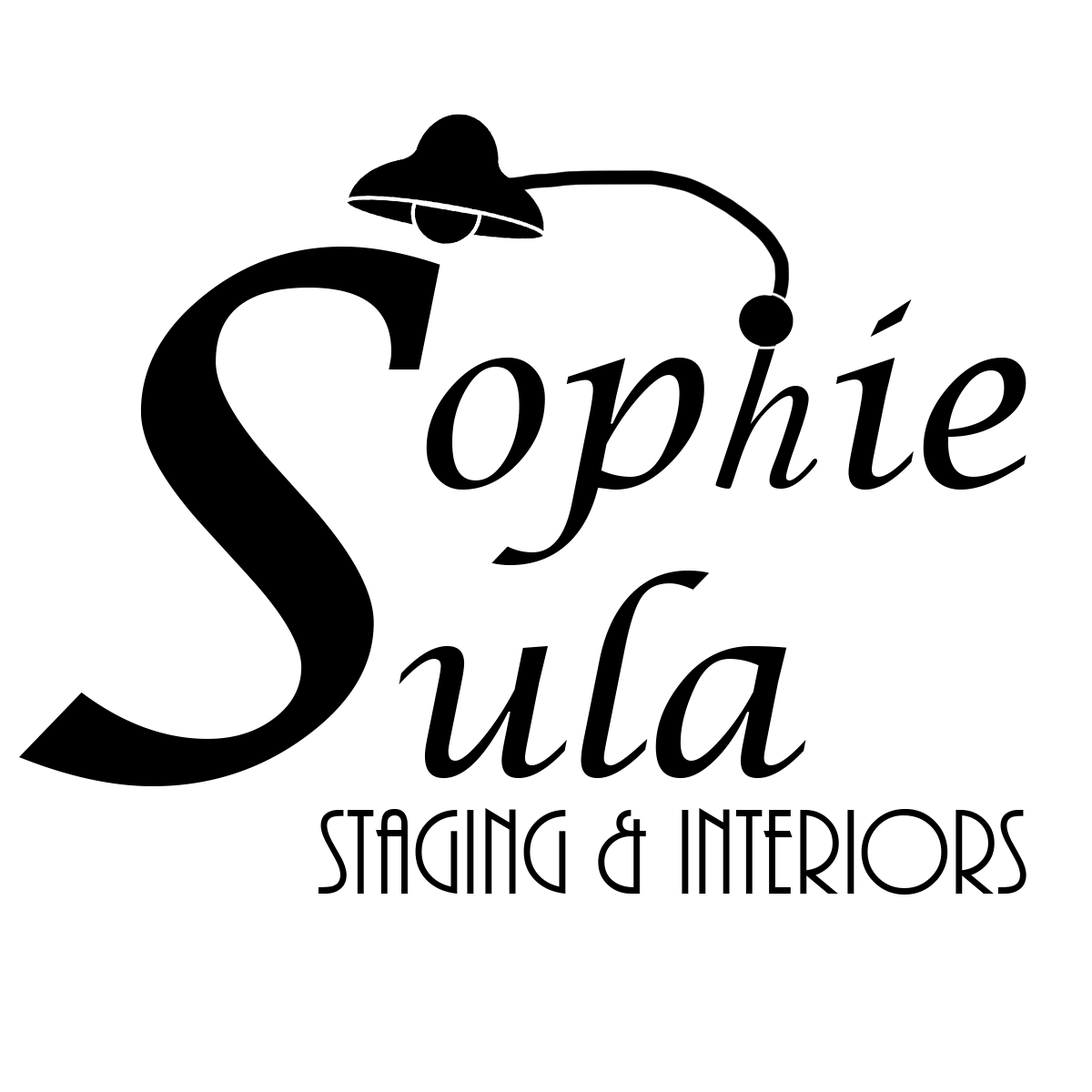
<style>
.page{position:relative;width:1092px;height:1092px;background:#ffffff}
.page>*{position:absolute;margin:0}
.t1{font:974.4px "LucidaCalligraphy-Italic";color:#000000}
.t2{font:238.9px "LucidaCalligraphy-Italic";color:#000000}
.t3{font:125.1px "ARBONNIE";color:#000000}
</style>
<div class="page">
<p class="t1" style="left:19px;top:247px;width:421px;height:539px">s</p>
<p class="t2" style="left:399px;top:571px;width:407px;height:207px">ula</p>
<p class="t3" style="left:318px;top:808px;width:708px;height:87px">sTAGING &amp; INTERIORS</p>
</div>
